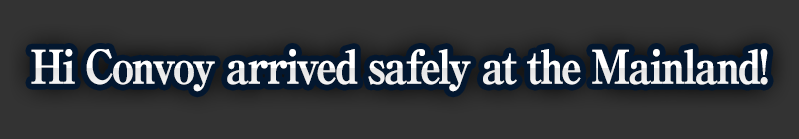
<style>
.page{position:relative;width:799px;height:139px;background:#333333}
.page>*{position:absolute;margin:0}
.t1{font:46px "RyuminPro-ExBold";letter-spacing:-0.08em;color:#ffffff;font-weight:bold;scale:0.9 1}
</style>
<div class="page">
<p class="t1" style="left:31px;top:49px;width:737px;height:43px">Hi Convoy arrived safely at the Mainland!</p>
</div>
